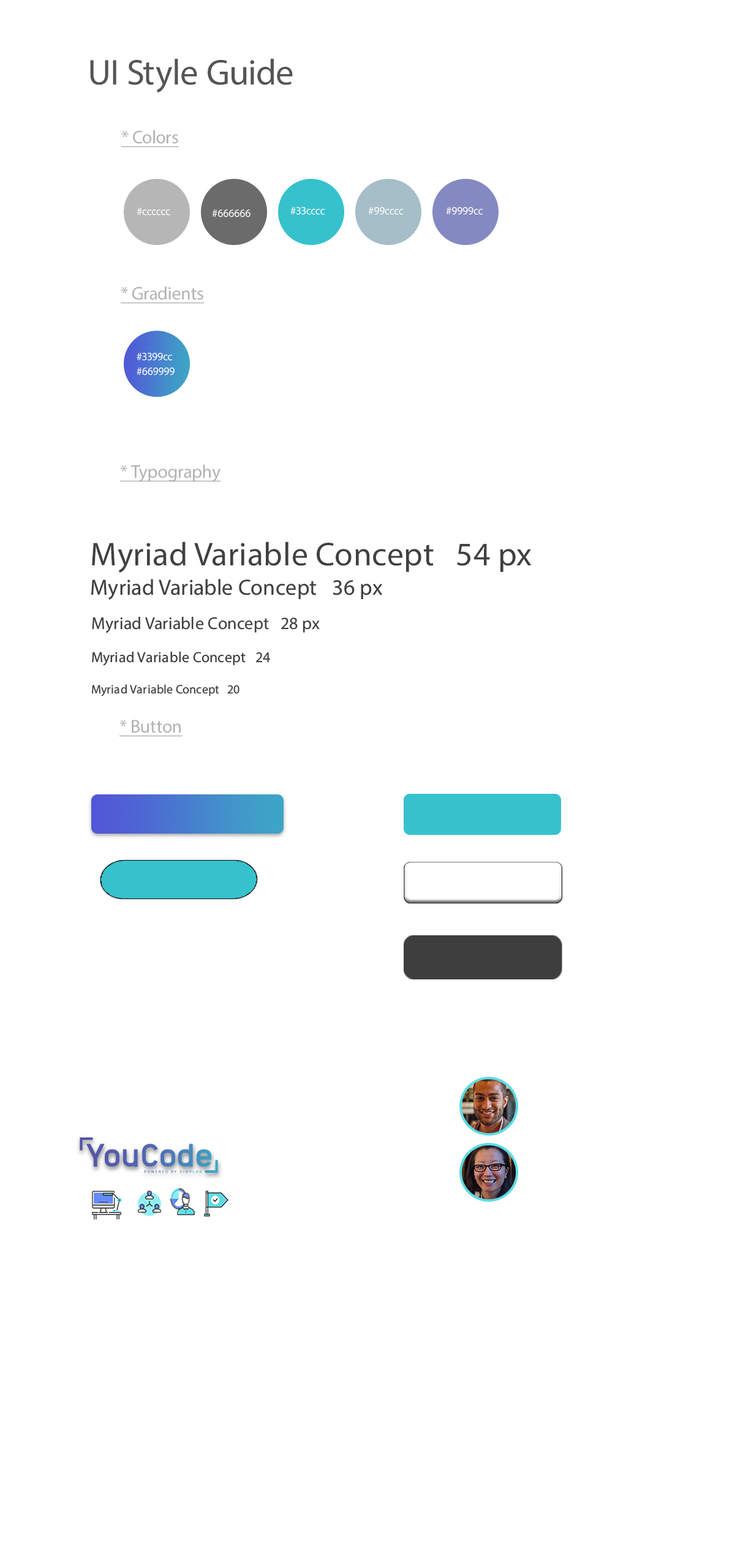
<style>
.page{position:relative;width:735px;height:1568px;background:#ffffff}
.page>*{position:absolute;margin:0}
.t1{font:36.1px "MyriadPro-Regular";color:#555555}
.t2{font:18.4px "MyriadPro-Regular";color:#b2b2b2;text-decoration:underline}
.t3{font:11px "MyriadPro-Regular";color:#ffffff}
.t4{font:11px/14.7px "MyriadPro-Regular";color:#ffffff}
.t5{font:33.1px "MyriadConceptRoman-Regular";letter-spacing:0.01em;color:#404040}
.t6{font:22.1px/36.8px "MyriadConceptRoman-Regular";letter-spacing:0.01em;color:#404040}
.t7{font:17.2px/36.8px "MyriadConceptRoman-Regular";letter-spacing:0.01em;color:#404040}
.t8{font:14.7px/36.8px "MyriadConceptRoman-Regular";letter-spacing:0.01em;color:#404040}
.t9{font:12.2px/36.8px "MyriadConceptRoman-Regular";letter-spacing:0.01em;color:#404040}
</style>
<div class="page">
<p class="t1" style="left:90px;top:59px;width:203px;height:33px">UI Style Guide</p>
<p class="t2" style="left:121px;top:130px;width:58px;height:18px">* Colors</p>
<p class="t3" style="left:137px;top:208px;width:33px;height:8px">#cccccc</p>
<p class="t3" style="left:212px;top:209px;width:39px;height:8px">#666666</p>
<p class="t3" style="left:290px;top:207px;width:35px;height:8px">#33cccc</p>
<p class="t3" style="left:368px;top:207px;width:36px;height:8px">#99cccc</p>
<p class="t3" style="left:446px;top:207px;width:37px;height:8px">#9999cc</p>
<p class="t2" style="left:121px;top:286px;width:84px;height:18px">* Gradients</p>
<p class="t4" style="left:137px;top:353px;width:38px;height:22px">#3399cc<br>#669999</p>
<p class="t2" style="left:120px;top:464px;width:101px;height:18px">* Typography</p>
<p class="t5" style="left:92px;top:541px;width:440px;height:32px">Myriad Variable Concept   54 px</p>
<p class="t6" style="left:91px;top:579px;width:292px;height:21px">Myriad Variable Concept   36 px<br> px</p>
<p class="t7" style="left:92px;top:617px;width:228px;height:16px">Myriad Variable Concept   28 px<br><span class="t6"> px</span></p>
<p class="t8" style="left:92px;top:651px;width:178px;height:15px">Myriad Variable Concept   24<br><span class="t9"><br> px<br> px</span></p>
<p class="t9" style="left:92px;top:684px;width:147px;height:12px">Myriad Variable Concept   20<br> px<br> px</p>
<p class="t2" style="left:119px;top:720px;width:64px;height:17px">* Button</p>
</div>
